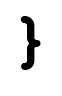
<style>
.page{position:relative;width:62px;height:96px;background:#ffffff}
.page>*{position:absolute;margin:0}
.t1{font:73px "CourierNewPS-BoldMT";letter-spacing:0.02em;color:#000000}
</style>
<div class="page">
<p class="t1" style="left:20px;top:16px;width:21px;height:54px">}</p>
</div>
